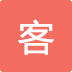
<style>
.page{position:relative;width:72px;height:72px;background:#f26d5f}
.page>*{position:absolute;margin:0}
.t1{font:36px "MicrosoftYaHei";letter-spacing:0.05em;color:#ffffff;font-weight:bold}
</style>
<div class="page">
<p class="t1" style="left:18px;top:19px;width:36px;height:36px">客</p>
</div>
